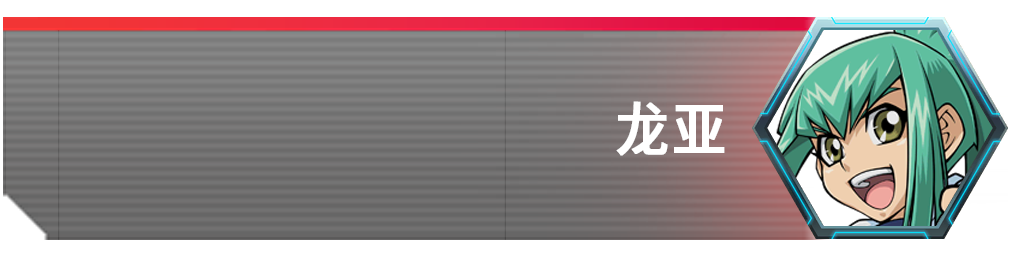
<style>
.page{position:relative;width:1024px;height:256px}
.page>*{position:absolute;margin:0}
.t1{font:58.7px "NotoSansHans-Medium";letter-spacing:0.05em;color:#ffffff;font-weight:bold;scale:0.91 1}
</style>
<div class="page">
<p class="t1" style="left:616px;top:101px;width:109px;height:55px">龙亚</p>
</div>
